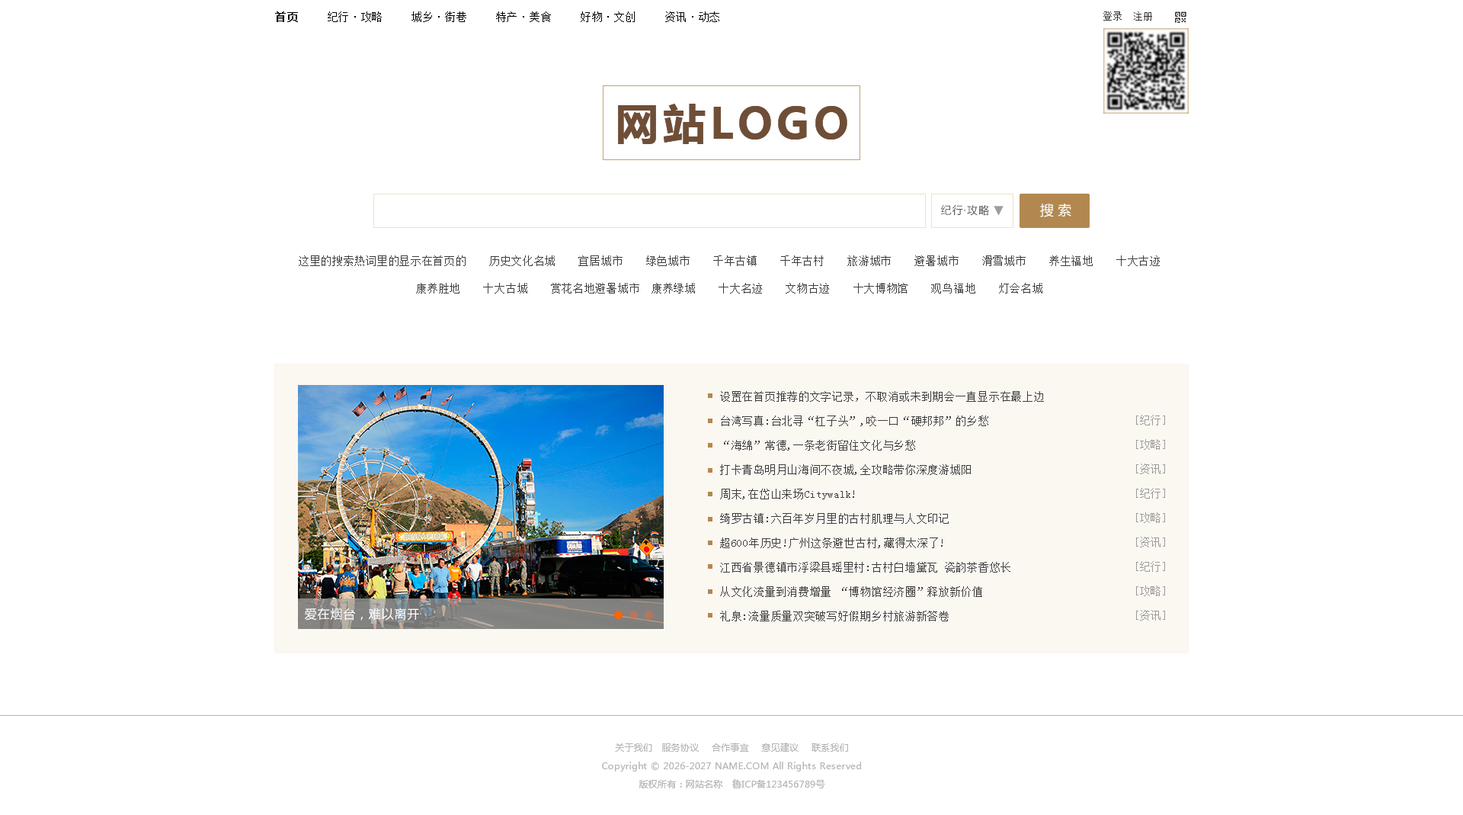
<style>
.page{position:relative;width:1463px;height:815px;background:#ffffff}
.page>*{position:absolute;margin:0}
.t1{font:10.7px "SimSun";letter-spacing:0.05em;color:#000000}
.t2{font:10.7px "SimSun";letter-spacing:0.05em;color:#000000;font-weight:bold}
.t3{font:9.9px "SimSun";color:#333333}
.t4{font:10.7px "MicrosoftYaHei";letter-spacing:0.075em;color:#595959}
.t5{font:13.7px "MicrosoftYaHei";color:#a09d9d}
.t6{font:13.7px "MicrosoftYaHei";color:#ffffff}
.t7{font:10.7px/27.4px "SimSun";letter-spacing:0.05em;color:#3e3e3e}
.t8{font:10.7px/24.4px "SimSun";letter-spacing:0.05em;color:#3e3e3e}
.t9{font:10.7px/24.4px "SimSun";letter-spacing:0.05em;color:#9b9b9b}
.t10{font:10.7px/24.4px "SimSun";letter-spacing:0.05em;color:#9b9b9b;font-style:italic}
.t11{font:12.2px "MicrosoftYaHei";letter-spacing:0.05em;color:#ffffff}
.t12{font:9.1px/18.3px "MicrosoftYaHei";letter-spacing:0.02em;color:#b5b5b5}
</style>
<div class="page">
<p class="t1" style="left:275px;top:11px;width:445px;height:11px"><span class="t2">首页</span>　　 纪行·攻略　　 城乡·街巷　　 特产·美食  　 好物·文创　　 资讯·动态</p>
<p class="t3" style="left:1104px;top:11px;width:48px;height:10px">登录  注册</p>
<p class="t4" style="left:941px;top:204px;width:48px;height:12px">纪行·攻略</p>
<p class="t5" style="left:994px;top:206px;width:10px;height:10px">▼</p>
<p class="t6" style="left:1040px;top:204px;width:32px;height:13px">搜 索</p>
<p class="t7" style="left:299px;top:255px;width:861px;height:38px;text-align:center">这里的搜索热词里的显示在首页的　　历史文化名城　　宜居城市　　绿色城市　　千年古镇　　千年古村　　旅游城市　　避暑城市　　滑雪城市　　养生福地　　十大古迹<br>康养胜地　　十大古城　　赏花名地避暑城市　康养绿城　　十大名迹　　文物古迹　　十大博物馆　　观鸟福地　　灯会名城</p>
<p class="t8" style="left:720px;top:391px;width:324px;height:230px">设置在首页推荐的文字记录，不取消或未到期会一直显示在最上边    <br>台湾写真:台北寻“杠子头”,咬一口“硬邦邦”的乡愁  <br>“海绵”常德,一条老街留住文化与乡愁<br>打卡青岛明月山海间不夜城,全攻略带你深度游城阳<br>周末,在岱山来场Citywalk!<br>绮罗古镇:六百年岁月里的古村肌理与人文印记<br>超600年历史!广州这条避世古村,藏得太深了!<br>江西省景德镇市浮梁县瑶里村:古村白墙黛瓦 瓷韵茶香悠长<br>从文化流量到消费增量 “博物馆经济圈”释放新价值<br>礼泉:流量质量双突破写好假期乡村旅游新答卷</p>
<p class="t9" style="left:1136px;top:415px;width:29px;height:205px;text-align:right"><span class="t10"><br></span>[纪行]<br>[攻略]<br>[资讯]<br>[纪行]<br>[攻略]<br>[资讯]<br>[纪行]<br>[攻略]<br>[资讯]<br><br>[资讯]</p>
<p class="t11" style="left:305px;top:607px;width:114px;height:13px">爱在烟台，难以离开</p>
<p class="t12" style="left:602px;top:742px;width:259px;height:46px;text-align:center">关于我们　服务协议 　合作事宜 　意见建议 　联系我们<br>Copyright © 2026-2027 NAME.COM All Rights Reserved<br>版权所有：网站名称　鲁ICP备123456789号</p>
</div>
